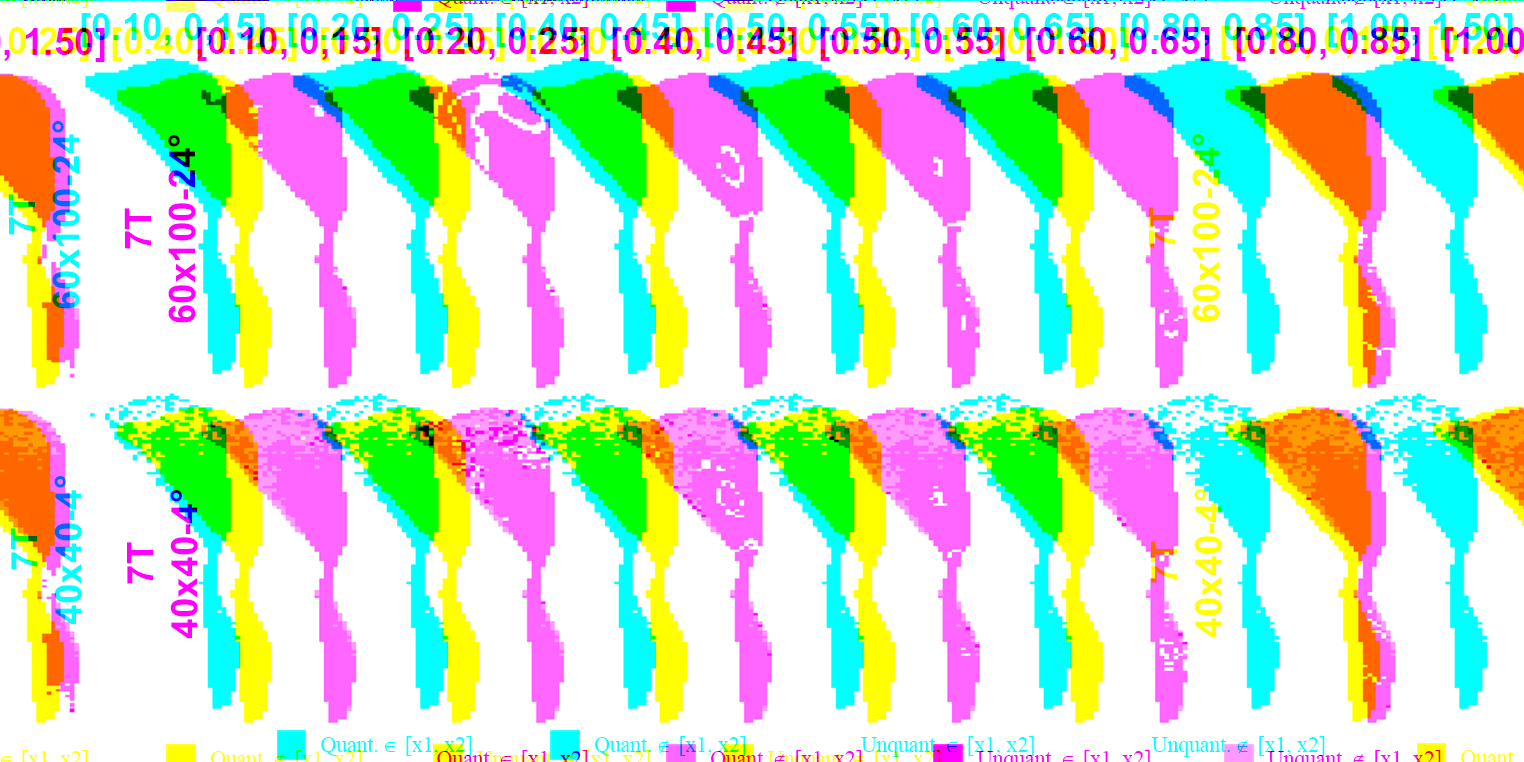
<style>
.page{position:relative;width:1524px;height:762px;background:#ffffff}
.page>*{position:absolute;margin:0}
.t1{font:36.9px "Arial-BoldMT"}
.t2{font:37px "Arial-BoldMT"}
.t3{font:21.6px "TimesNewRomanPSMT"}
.t4{font:21.6px "Symbol"}
</style>
<div class="page">
<p class="t1" style="left:81px;top:12px;width:184px;height:34px">[0.10, 0,15]</p>
<p class="t1" style="left:288px;top:12px;width:185px;height:34px">[0.20, 0.25]</p>
<p class="t1" style="left:496px;top:12px;width:185px;height:34px">[0.40, 0.45]</p>
<p class="t1" style="left:704px;top:12px;width:185px;height:34px">[0.50, 0.55]</p>
<p class="t1" style="left:910px;top:12px;width:184px;height:34px">[0.60, 0.65]</p>
<p class="t1" style="left:1120px;top:12px;width:184px;height:34px">[0.80, 0.85]</p>
<p class="t1" style="left:1328px;top:12px;width:185px;height:34px">[1.00, 1.50]</p>
<p class="t2" style="left:8px;top:120px;width:72px;height:188px;text-align:center;rotate:180deg">7T<br>60x100-24°</p>
<p class="t2" style="left:11px;top:475px;width:71px;height:149px;text-align:center;rotate:180deg">7T<br>40x40-4°</p>
<p class="t3" style="left:321px;top:735px;width:151px;height:20px">Quant. <span class="t4">∈ </span>[x1, x2]</p>
<p class="t3" style="left:594px;top:735px;width:152px;height:20px">Quant. <span class="t4">∉ </span>[x1, x2]</p>
<p class="t3" style="left:861px;top:735px;width:173px;height:21px">Unquant. <span class="t4">∈ </span>[x1, x2]</p>
<p class="t3" style="left:1151px;top:735px;width:174px;height:21px">Unquant. <span class="t4">∉ </span>[x1, x2]</p>
</div>
